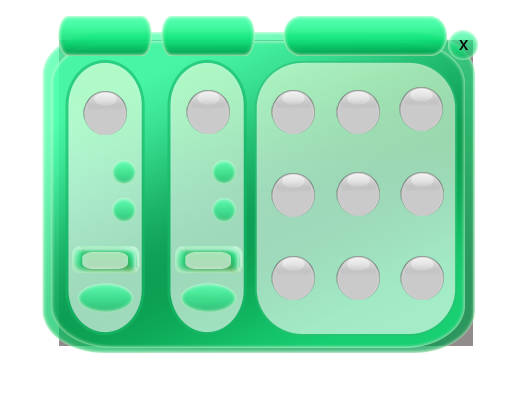
<style>
.page{position:relative;width:514px;height:406px;background:#ffffff}
.page>*{position:absolute;margin:0}
.t1{font:20px "MyriadPro-Regular";color:#000000}
</style>
<div class="page">
<p class="t1" style="left:459px;top:40px;width:9px;height:10px">x</p>
</div>
